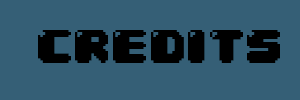
<style>
.page{position:relative;width:300px;height:100px;background:#355f76}
.page>*{position:absolute;margin:0}
.t1{font:40px "04b30";color:#000000}
</style>
<div class="page">
<p class="t1" style="left:38px;top:30px;width:242px;height:33px">CREDITS</p>
</div>
